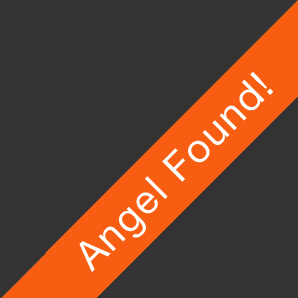
<style>
.page{position:relative;width:298px;height:298px;background:#333333}
.page>*{position:absolute;margin:0}
.t1{font:40px "HelveticaNeue";letter-spacing:0.05em;color:#ffffff}
</style>
<div class="page">
<p class="t1" style="left:79px;top:71px;width:195px;height:202px;rotate:-45deg">Angel Found!</p>
</div>
